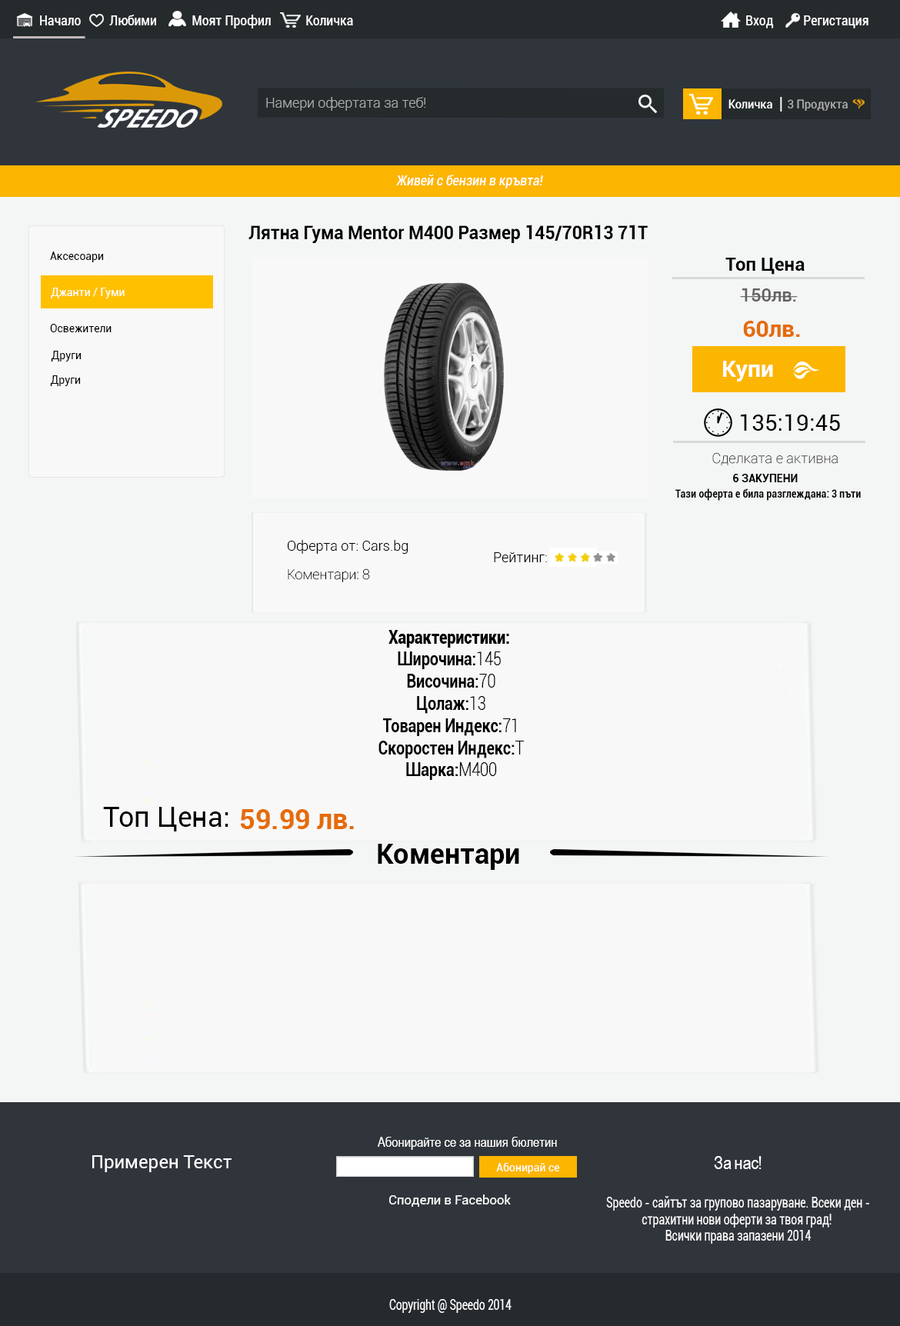
<style>
.page{position:relative;width:900px;height:1326px;background:#f8f8f8}
.page>*{position:absolute;margin:0}
.t1{font:13.8px "Roboto-Condensed";color:#ffffff}
.t2{font:13.7px "Roboto-Light";color:#acacac}
.t3{font:12.4px "Roboto-Condensed";color:#ffffff;scale:1.03 1}
.t4{font:17.8px "Roboto-Regular";color:#ffffff;scale:0.72 1}
.t5{font:12.4px "Roboto-Condensed";color:#acacac;scale:1.03 1}
.t6{font:13.8px "Roboto-CondensedItalic";color:#ffffff}
.t7{font:18.5px "Roboto-Bold";color:#000000;scale:0.95 1}
.t8{font:10.8px "Roboto-Regular";color:#000000}
.t9{font:18.5px "Roboto-Bold";color:#000000}
.t10{font:10.8px "Roboto-Regular";color:#ffffff}
.t11{font:18.5px "Roboto-Medium";color:#646161}
.t12{font:23.1px "Roboto-Bold";color:#e66b07}
.t13{font:23.1px "Roboto-Bold";color:#ffffff}
.t14{font:23.1px "Roboto-Regular";color:#000000}
.t15{font:13.8px "Roboto-Thin";color:#363636}
.t16{font:10.8px "Roboto-Bold";color:#000000}
.t17{font:10.8px "Roboto-Bold";color:#000000;scale:0.89 1}
.t18{font:13.8px "Roboto-Light";color:#000000}
.t19{font:13.8px "Roboto-Thin";color:#000000}
.t20{font:18.5px "Roboto-Bold";color:#000000;scale:0.82 1}
.t21{font:18.5px "Roboto-Black";color:#000000;scale:0.82 1}
.t22{font:18.5px "Roboto-Light";color:#000000;scale:0.82 1}
.t23{font:27.7px "Roboto-Regular";color:#000000}
.t24{font:27.7px "Roboto-Bold";color:#e66b07}
.t25{font:27.7px "Roboto-Bold";color:#000000}
.t26{font:13.8px "ArialNarrow";color:#ffffff}
.t27{font:18.5px "Roboto-Regular";color:#ffffff}
.t28{font:18.5px "ArialNarrow";color:#ffffff}
.t29{font:18.5px "PoorRichard-Regular";color:#ffffff}
.t30{font:13.2px "Roboto-Regular";color:#ffffff}
.t31{font:13.8px "Roboto-Regular";color:#ffffff;scale:0.77 1}
.t32{font:13.8px "Roboto-Regular";color:#ffffff;scale:0.76 1}
</style>
<div class="page">
<p class="t1" style="left:40px;top:15px;width:41px;height:10px">Начало</p>
<p class="t1" style="left:109px;top:15px;width:47px;height:10px">Любими</p>
<p class="t1" style="left:192px;top:15px;width:79px;height:13px">Моят Профил</p>
<p class="t1" style="left:306px;top:15px;width:47px;height:10px">Количка</p>
<p class="t1" style="left:746px;top:15px;width:27px;height:13px">Вход</p>
<p class="t1" style="left:803px;top:15px;width:65px;height:13px">Регистация</p>
<p class="t2" style="left:266px;top:97px;width:159px;height:14px">Намери офертата за теб!</p>
<p class="t3" style="left:728px;top:99px;width:44px;height:9px">Koличка</p>
<p class="t4" style="left:780px;top:97px;width:2px;height:14px">|</p>
<p class="t5" style="left:787px;top:99px;width:60px;height:12px">3 Продукта</p>
<p class="t6" style="left:396px;top:175px;width:147px;height:13px">Живей с бензин в кръвта!</p>
<p class="t7" style="left:248px;top:225px;width:399px;height:18px">Лятна Гума Mentor M400 Размер 145/70R13 71T</p>
<p class="t8" style="left:50px;top:251px;width:54px;height:11px">Аксесоари</p>
<p class="t9" style="left:725px;top:258px;width:79px;height:16px">Топ Цена</p>
<p class="t10" style="left:51px;top:288px;width:74px;height:10px">Джанти / Гуми</p>
<p class="t11" style="left:740px;top:288px;width:57px;height:13px">150лв.</p>
<p class="t8" style="left:50px;top:324px;width:61px;height:8px">Освежители</p>
<p class="t12" style="left:743px;top:321px;width:57px;height:16px">60лв.</p>
<p class="t8" style="left:51px;top:351px;width:31px;height:10px">Други</p>
<p class="t13" style="left:723px;top:361px;width:50px;height:20px">Купи</p>
<p class="t8" style="left:50px;top:375px;width:31px;height:11px">Други</p>
<p class="t14" style="left:740px;top:414px;width:100px;height:17px">135:19:45</p>
<p class="t15" style="left:712px;top:452px;width:125px;height:14px">Сделката е активна</p>
<p class="t16" style="left:733px;top:474px;width:64px;height:8px">6 ЗАКУПЕНИ</p>
<p class="t17" style="left:675px;top:488px;width:185px;height:13px">Тази оферта е била разглеждана: 3 пъти</p>
<p class="t18" style="left:288px;top:540px;width:120px;height:14px">Оферта от: Cars.bg</p>
<p class="t18" style="left:494px;top:552px;width:53px;height:10px">Рейтинг:</p>
<p class="t19" style="left:288px;top:568px;width:82px;height:14px">Коментари: 8</p>
<p class="t20" style="left:378px;top:630px;width:146px;height:150px;text-align:center"><span class="t21">Характеристики:<br></span>Широчина:<span class="t22">145<br></span> Височина:<span class="t22">70<br> </span>Цолаж:<span class="t22">13<br> </span>Товарен Индекс:<span class="t22">71<br> </span>Скоростен Индекс:<span class="t22">T<br> </span>Шарка:<span class="t22">M400</span></p>
<p class="t23" style="left:103px;top:807px;width:125px;height:24px">Топ Цена:</p>
<p class="t24" style="left:241px;top:809px;width:113px;height:20px">59.99 лв.</p>
<p class="t25" style="left:378px;top:843px;width:141px;height:27px">Коментари</p>
<p class="t26" style="left:378px;top:1136px;width:179px;height:13px">Абонирайте се за нашия бюлетин</p>
<p class="t27" style="left:92px;top:1155px;width:139px;height:17px">Примерен Текст</p>
<p class="t28" style="left:714px;top:1156px;width:47px;height:13px">За нас<span class="t29">!</span></p>
<p class="t10" style="left:496px;top:1163px;width:64px;height:10px">Абонирай се</p>
<p class="t30" style="left:389px;top:1194px;width:122px;height:12px">Сподели в Facebook</p>
<p class="t31" style="left:606px;top:1196px;width:263px;height:47px;text-align:center">Speedo - сайтът за групово пазаруване. Всеки ден -<br>страхитни нови оферти за твоя град! <br>Всички права запазени 2014</p>
<p class="t32" style="left:389px;top:1299px;width:122px;height:13px">Copyright @ Speedo 2014</p>
</div>
